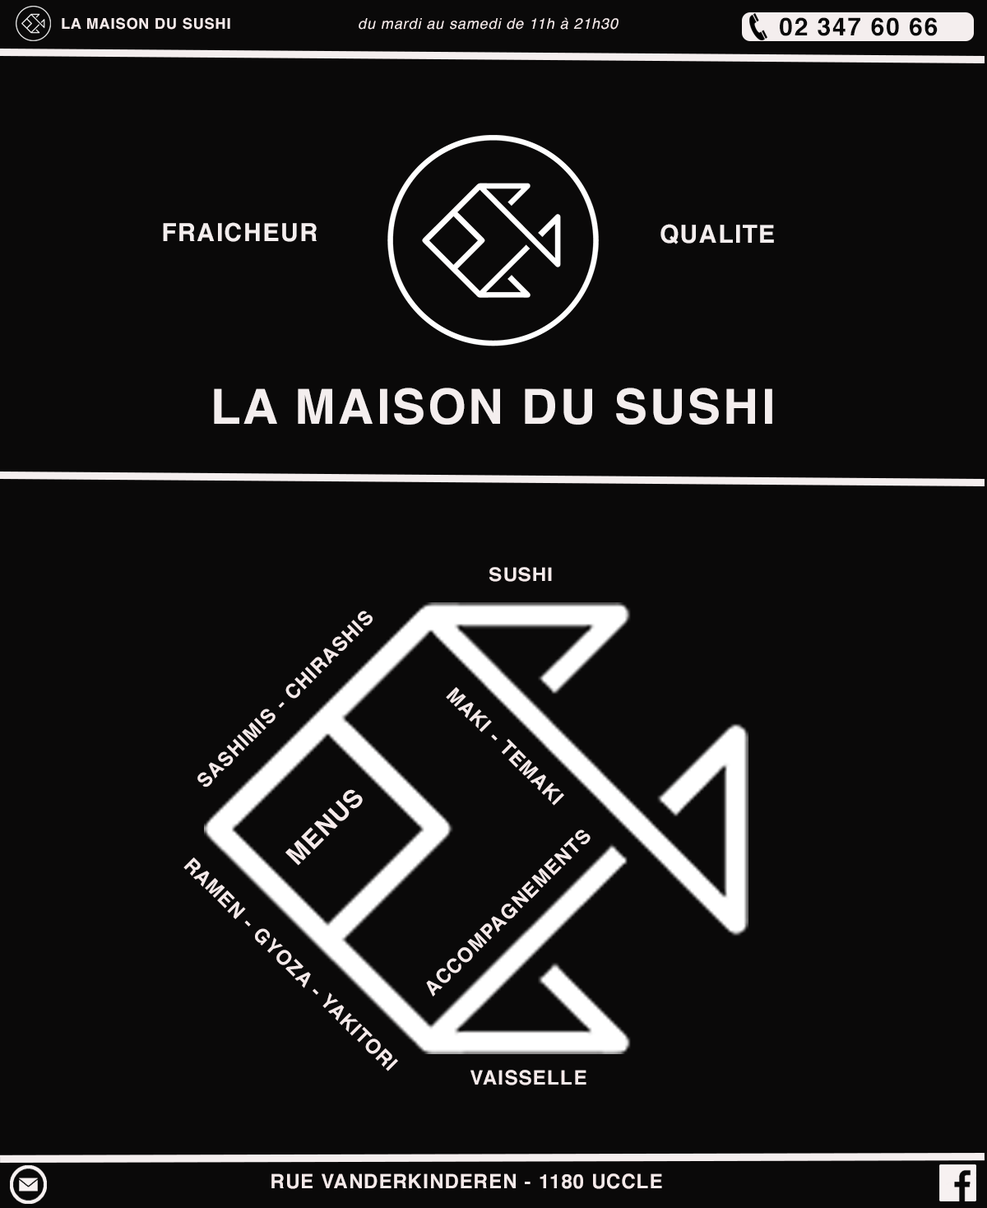
<style>
.page{position:relative;width:987px;height:1208px;background:#0a0909}
.page>*{position:absolute;margin:0}
.t1{font:14.8px "Helvetica-Bold";letter-spacing:0.05em;color:#f5eaea}
.t2{font:14.8px "Helvetica-Oblique";letter-spacing:0.05em;color:#f5eaea}
.t3{font:24.7px "Helvetica-Bold";letter-spacing:0.05em;color:#090909}
.t4{font:24.7px "Helvetica-Bold";letter-spacing:0.05em;color:#f4eeee}
.t5{font:48.2px "Helvetica-Bold";letter-spacing:0.05em;color:#f4eeee}
.t6{font:18.7px "Helvetica-Bold";letter-spacing:0.05em;color:#f5eaea;scale:1.06 1}
.t7{font:19.7px "Helvetica-Bold";letter-spacing:0.05em;color:#f5eaea}
.t8{font:25.2px "Helvetica-Bold";letter-spacing:0.05em;color:#f5eaea}
</style>
<div class="page">
<p class="t1" style="left:62px;top:17px;width:168px;height:13px">LA MAISON DU SUSHI</p>
<p class="t2" style="left:359px;top:17px;width:260px;height:13px">du mardi au samedi de 11h à 21h30</p>
<p class="t3" style="left:780px;top:17px;width:158px;height:19px">02 347 60 66</p>
<p class="t4" style="left:163px;top:222px;width:154px;height:20px">FRAICHEUR</p>
<p class="t4" style="left:661px;top:224px;width:113px;height:20px">QUALITE</p>
<p class="t5" style="left:214px;top:388px;width:559px;height:37px">LA MAISON DU SUSHI</p>
<p class="t6" style="left:490px;top:567px;width:62px;height:15px">SUSHI</p>
<p class="t7" style="left:197px;top:610px;width:176px;height:177px;rotate:-45deg">SASHIMIS - CHIRASHIS</p>
<p class="t7" style="left:446px;top:687px;width:118px;height:118px;rotate:45deg">MAKI - TEMAKI</p>
<p class="t8" style="left:285px;top:789px;width:78px;height:77px;rotate:-44deg">MENUS</p>
<p class="t7" style="left:426px;top:829px;width:165px;height:167px;rotate:-45deg">ACCOMPAGNEMENTS</p>
<p class="t7" style="left:183px;top:857px;width:215px;height:214px;rotate:45deg">RAMEN - GYOZA - YAKITORI</p>
<p class="t7" style="left:471px;top:1070px;width:116px;height:15px">VAISSELLE</p>
<p class="t7" style="left:272px;top:1173px;width:390px;height:16px">RUE VANDERKINDEREN - 1180 UCCLE</p>
</div>
